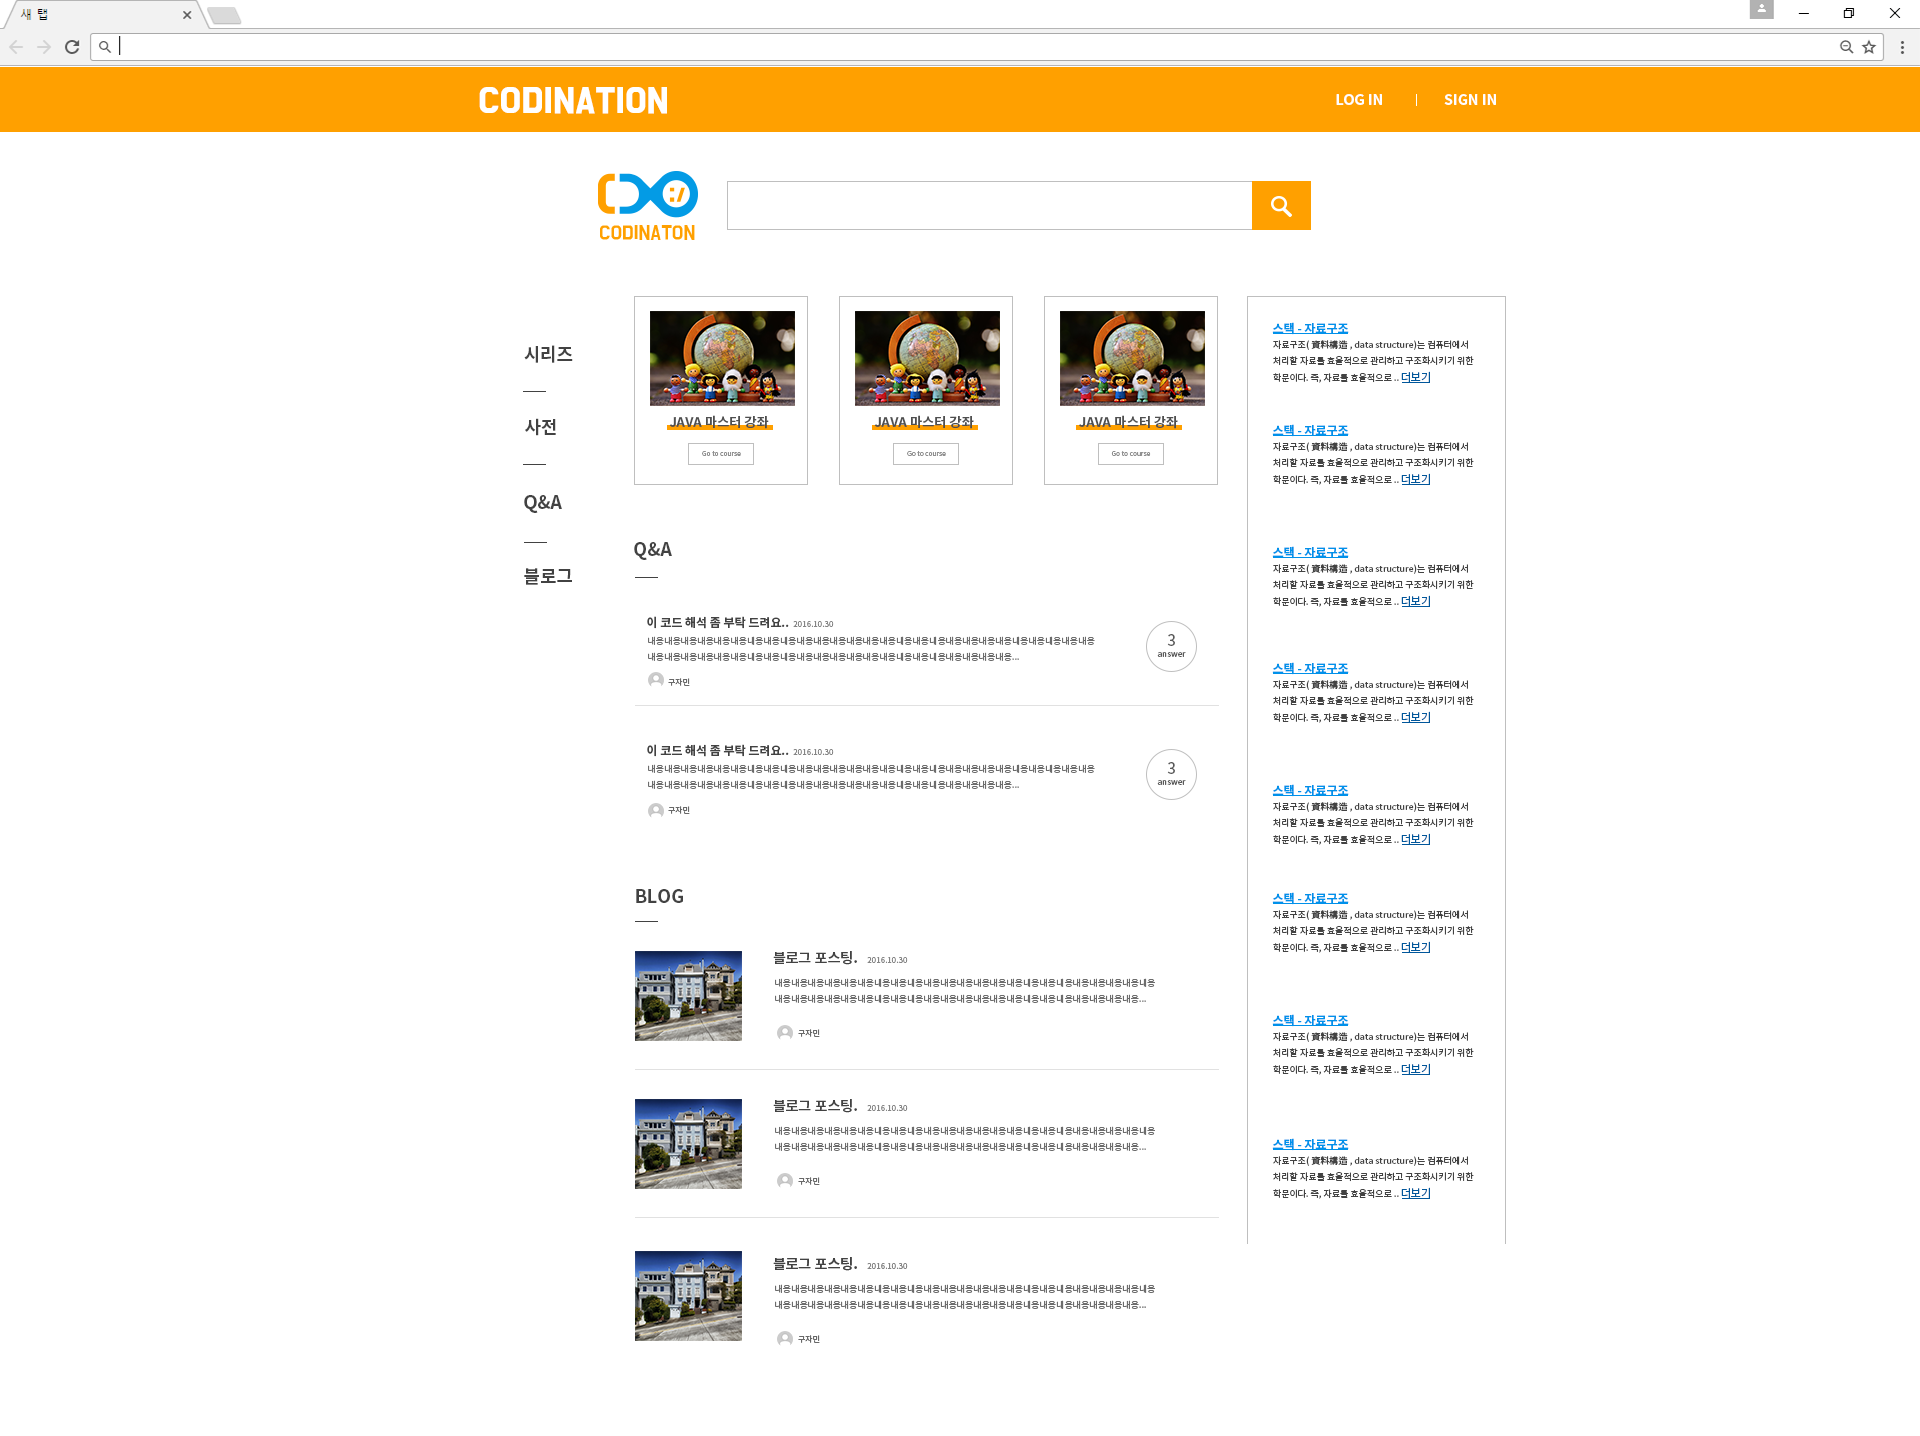
<style>
.page{position:relative;width:1920px;height:1436px;background:#ffffff}
.page>*{position:absolute;margin:0}
.t1{font:30px "BMDoHyeon";color:#ffffff;font-weight:bold}
.t2{font:14.2px "NotoSansCJKkr-Bold";color:#ffffff}
.t3{font:12px "NotoSansCJKkr-Bold";color:#0091ea}
.t4{font:9px "NotoSansCJKkr-Regular";color:#424242}
.t5{font:11px "NotoSansCJKkr-Regular";color:#01579b}
.t6{font:18px "NotoSansCJKkr-Bold";color:#424242}
.t7{font:13.3px "NotoSansCJKkr-Bold";color:#4f4f4f}
.t8{font:6.6px "NotoSansCJKkr-Regular";color:#909090}
.t9{font:12px "NotoSansCJKkr-Bold";color:#424242}
.t10{font:8px "NotoSansCJKkr-Regular";color:#858585}
.t11{font:9px "NotoSansCJKkr-Regular";color:#6c6c6c}
.t12{font:15.5px "NotoSansCJKkr-Regular";color:#595959}
.t13{font:8.3px "NotoSansCJKkr-Regular";color:#595959}
.t14{font:8px "NotoSansCJKkr-Regular";color:#686868}
.t15{font:14px "NotoSansCJKkr-Bold";color:#424242}
</style>
<div class="page">
<p class="t1" style="left:479px;top:87px;width:188px;height:27px">CODINATION</p>
<p class="t2" style="left:1336px;top:94px;width:46px;height:11px">LOG IN</p>
<p class="t2" style="left:1444px;top:94px;width:52px;height:11px">SIGN IN</p>
<p class="t3" style="left:1272px;top:322px;width:77px;height:13px">스택 - 자료구조</p>
<p class="t4" style="left:1273px;top:340px;width:201px;height:43px">자료구조(資料構造, data structure)는 컴퓨터에서 처리할 자료를 효율적으로 관리하고 구조화시키기 위한 학문이다. 즉, 자료를 효율적으로 .. <span class="t5">더보기</span></p>
<p class="t6" style="left:524px;top:345px;width:49px;height:18px">시리즈</p>
<p class="t6" style="left:525px;top:418px;width:31px;height:18px">사전</p>
<p class="t7" style="left:669px;top:415px;width:100px;height:14px">JAVA 마스터 강좌</p>
<p class="t7" style="left:874px;top:415px;width:100px;height:14px">JAVA 마스터 강좌</p>
<p class="t7" style="left:1079px;top:415px;width:99px;height:14px">JAVA 마스터 강좌</p>
<p class="t3" style="left:1272px;top:424px;width:77px;height:13px">스택 - 자료구조</p>
<p class="t4" style="left:1273px;top:442px;width:201px;height:43px">자료구조(資料構造, data structure)는 컴퓨터에서 처리할 자료를 효율적으로 관리하고 구조화시키기 위한 학문이다. 즉, 자료를 효율적으로 .. <span class="t5">더보기</span></p>
<p class="t8" style="left:702px;top:451px;width:39px;height:5px">Go to course</p>
<p class="t8" style="left:907px;top:451px;width:39px;height:5px">Go to course</p>
<p class="t8" style="left:1111px;top:451px;width:40px;height:5px">Go to course</p>
<p class="t6" style="left:524px;top:495px;width:38px;height:18px">Q&amp;A</p>
<p class="t6" style="left:634px;top:542px;width:38px;height:18px">Q&amp;A</p>
<p class="t3" style="left:1272px;top:546px;width:77px;height:13px">스택 - 자료구조</p>
<p class="t6" style="left:524px;top:568px;width:48px;height:17px">블로그</p>
<p class="t4" style="left:1273px;top:564px;width:201px;height:43px">자료구조(資料構造, data structure)는 컴퓨터에서 처리할 자료를 효율적으로 관리하고 구조화시키기 위한 학문이다. 즉, 자료를 효율적으로 .. <span class="t5">더보기</span></p>
<p class="t9" style="left:647px;top:616px;width:142px;height:13px">이 코드 해석 좀 부탁 드려요..</p>
<p class="t10" style="left:793px;top:621px;width:41px;height:6px">2016.10.30</p>
<p class="t11" style="left:648px;top:636px;width:447px;height:25px">내용내용내용내용내용내용내용내용내용내용내용내용내용내용내용내용내용내용내용내용내용내용내용내용내용내용내용<br>내용내용내용내용내용내용내용내용내용내용내용내용내용내용내용내용내용내용내용내용내용내용...</p>
<p class="t12" style="left:1167px;top:634px;width:8px;height:12px">3</p>
<p class="t13" style="left:1157px;top:652px;width:29px;height:5px">answer</p>
<p class="t3" style="left:1272px;top:662px;width:77px;height:13px">스택 - 자료구조</p>
<p class="t14" style="left:668px;top:678px;width:22px;height:8px">구자민</p>
<p class="t4" style="left:1273px;top:680px;width:201px;height:43px">자료구조(資料構造, data structure)는 컴퓨터에서 처리할 자료를 효율적으로 관리하고 구조화시키기 위한 학문이다. 즉, 자료를 효율적으로 .. <span class="t5">더보기</span></p>
<p class="t9" style="left:647px;top:744px;width:142px;height:13px">이 코드 해석 좀 부탁 드려요..</p>
<p class="t10" style="left:793px;top:749px;width:41px;height:6px">2016.10.30</p>
<p class="t11" style="left:648px;top:764px;width:447px;height:25px">내용내용내용내용내용내용내용내용내용내용내용내용내용내용내용내용내용내용내용내용내용내용내용내용내용내용내용<br>내용내용내용내용내용내용내용내용내용내용내용내용내용내용내용내용내용내용내용내용내용내용...</p>
<p class="t12" style="left:1167px;top:762px;width:8px;height:12px">3</p>
<p class="t13" style="left:1157px;top:780px;width:29px;height:5px">answer</p>
<p class="t3" style="left:1272px;top:784px;width:77px;height:13px">스택 - 자료구조</p>
<p class="t14" style="left:668px;top:806px;width:22px;height:8px">구자민</p>
<p class="t4" style="left:1273px;top:802px;width:201px;height:43px">자료구조(資料構造, data structure)는 컴퓨터에서 처리할 자료를 효율적으로 관리하고 구조화시키기 위한 학문이다. 즉, 자료를 효율적으로 .. <span class="t5">더보기</span></p>
<p class="t6" style="left:636px;top:889px;width:47px;height:14px">BLOG</p>
<p class="t3" style="left:1272px;top:892px;width:77px;height:13px">스택 - 자료구조</p>
<p class="t4" style="left:1273px;top:910px;width:201px;height:43px">자료구조(資料構造, data structure)는 컴퓨터에서 처리할 자료를 효율적으로 관리하고 구조화시키기 위한 학문이다. 즉, 자료를 효율적으로 .. <span class="t5">더보기</span></p>
<p class="t15" style="left:773px;top:951px;width:84px;height:14px">블로그 포스팅.</p>
<p class="t10" style="left:867px;top:957px;width:41px;height:6px">2016.10.30</p>
<p class="t11" style="left:775px;top:978px;width:380px;height:25px">내용내용내용내용내용내용내용내용내용내용내용내용내용내용내용내용내용내용내용내용내용내용내용<br>내용내용내용내용내용내용내용내용내용내용내용내용내용내용내용내용내용내용내용내용내용내용...</p>
<p class="t3" style="left:1272px;top:1014px;width:77px;height:13px">스택 - 자료구조</p>
<p class="t14" style="left:798px;top:1029px;width:22px;height:8px">구자민</p>
<p class="t4" style="left:1273px;top:1032px;width:201px;height:43px">자료구조(資料構造, data structure)는 컴퓨터에서 처리할 자료를 효율적으로 관리하고 구조화시키기 위한 학문이다. 즉, 자료를 효율적으로 .. <span class="t5">더보기</span></p>
<p class="t15" style="left:773px;top:1099px;width:84px;height:14px">블로그 포스팅.</p>
<p class="t10" style="left:867px;top:1105px;width:41px;height:6px">2016.10.30</p>
<p class="t11" style="left:775px;top:1126px;width:380px;height:25px">내용내용내용내용내용내용내용내용내용내용내용내용내용내용내용내용내용내용내용내용내용내용내용<br>내용내용내용내용내용내용내용내용내용내용내용내용내용내용내용내용내용내용내용내용내용내용...</p>
<p class="t3" style="left:1272px;top:1138px;width:77px;height:13px">스택 - 자료구조</p>
<p class="t4" style="left:1273px;top:1156px;width:201px;height:43px">자료구조(資料構造, data structure)는 컴퓨터에서 처리할 자료를 효율적으로 관리하고 구조화시키기 위한 학문이다. 즉, 자료를 효율적으로 .. <span class="t5">더보기</span></p>
<p class="t14" style="left:798px;top:1177px;width:22px;height:8px">구자민</p>
<p class="t15" style="left:773px;top:1257px;width:84px;height:14px">블로그 포스팅.</p>
<p class="t10" style="left:867px;top:1263px;width:41px;height:6px">2016.10.30</p>
<p class="t11" style="left:775px;top:1284px;width:380px;height:25px">내용내용내용내용내용내용내용내용내용내용내용내용내용내용내용내용내용내용내용내용내용내용내용<br>내용내용내용내용내용내용내용내용내용내용내용내용내용내용내용내용내용내용내용내용내용내용...</p>
<p class="t14" style="left:798px;top:1335px;width:22px;height:8px">구자민</p>
</div>
